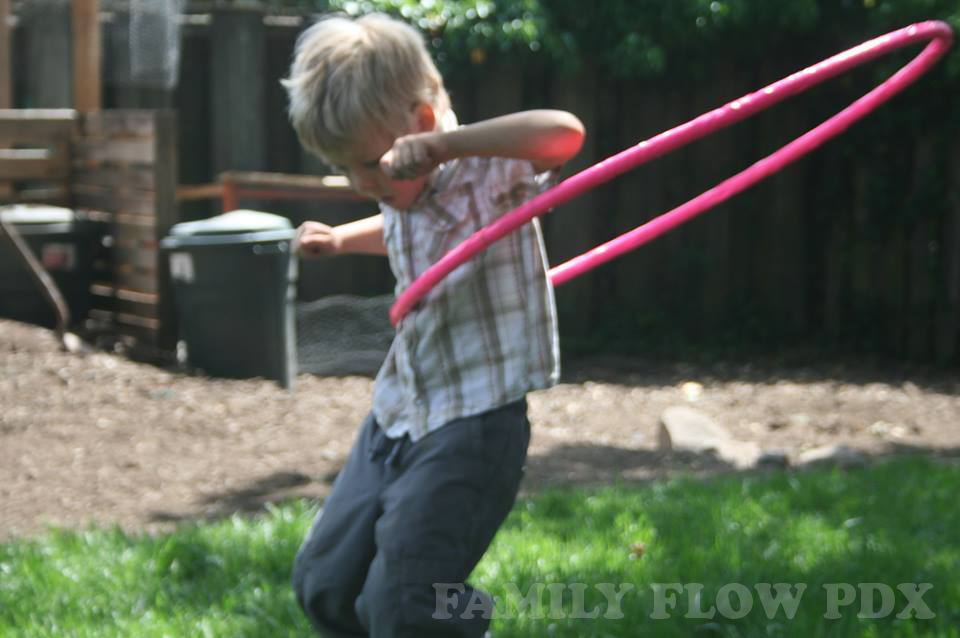
<style>
.page{position:relative;width:960px;height:638px}
.page>*{position:absolute;margin:0}
.t1{font:48px "CooperBlackStd";color:#537156}
</style>
<div class="page">
<p class="t1" style="left:431px;top:583px;width:505px;height:36px">FAMILY FLOW PDX</p>
</div>
